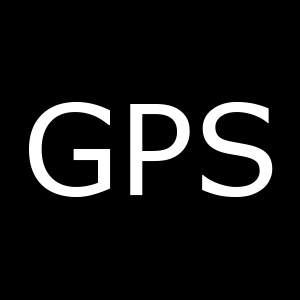
<style>
.page{position:relative;width:300px;height:300px;background:#000000}
.page>*{position:absolute;margin:0}
.t1{font:125px "Verdana";color:#ffffff}
</style>
<div class="page">
<p class="t1" style="left:29px;top:102px;width:244px;height:95px">GPS</p>
</div>
